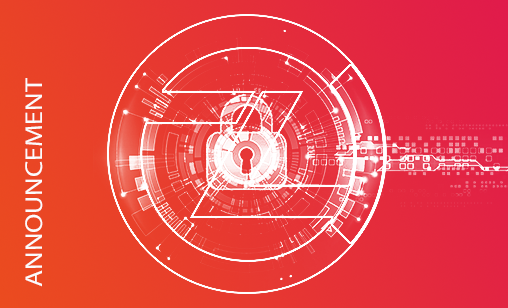
<style>
.page{position:relative;width:508px;height:308px}
.page>*{position:absolute;margin:0}
.t1{font:24.6px "MyriadPro-Regular";color:#fbfbfc;scale:1.14 1}
</style>
<div class="page">
<p class="t1" style="left:25px;top:78px;width:18px;height:209px;rotate:-90deg">ANNOUNCEMENT</p>
</div>
